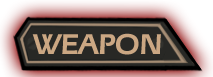
<style>
.page{position:relative;width:213px;height:77px}
.page>*{position:absolute;margin:0}
.t1{font:30px "037-CAI978";color:#cba783}
</style>
<div class="page">
<p class="t1" style="left:32px;top:33px;width:129px;height:22px">WEAPON</p>
</div>
